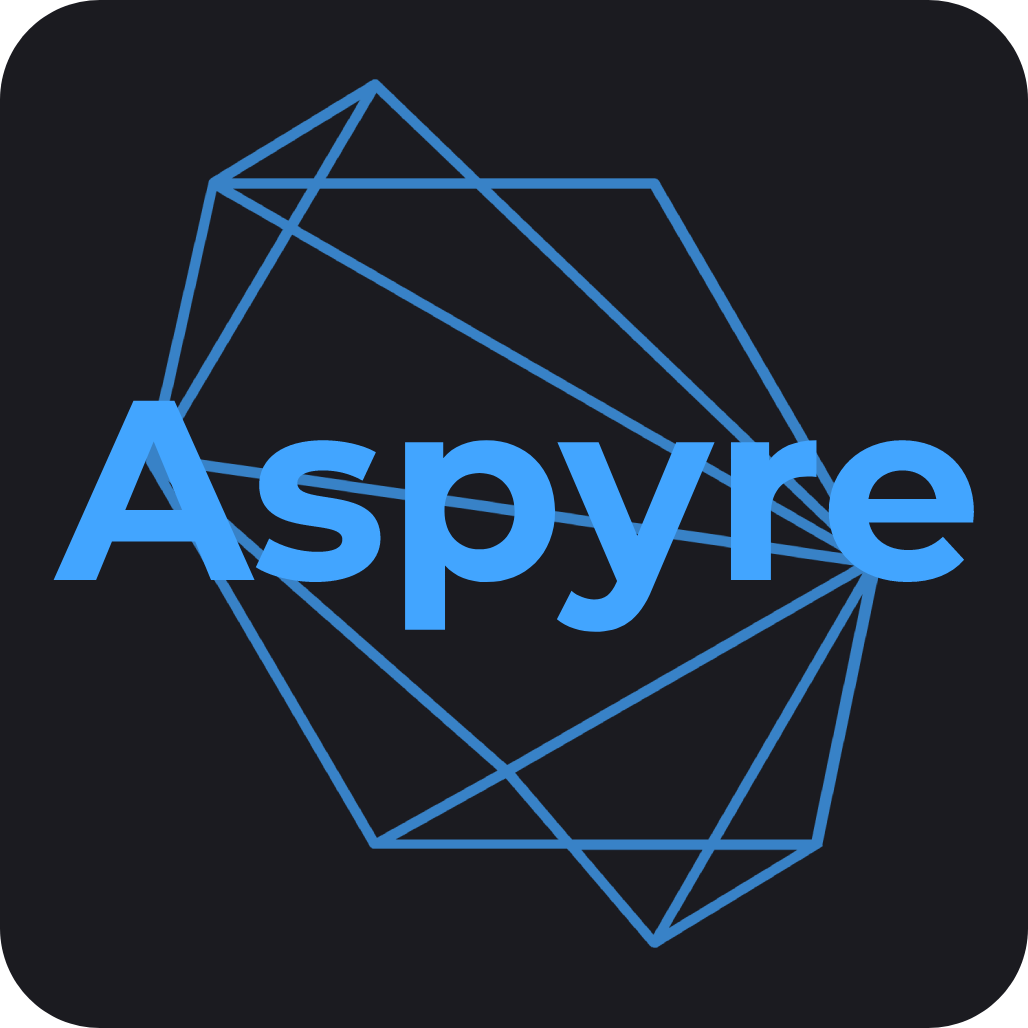
<style>
.page{position:relative;width:1028px;height:1028px;background:#1b1b20}
.page>*{position:absolute;margin:0}
.t1{font:256px "Montserrat-Bold";color:#42a5ff}
</style>
<div class="page">
<p class="t1" style="left:53px;top:400px;width:921px;height:232px">Aspyre</p>
</div>
